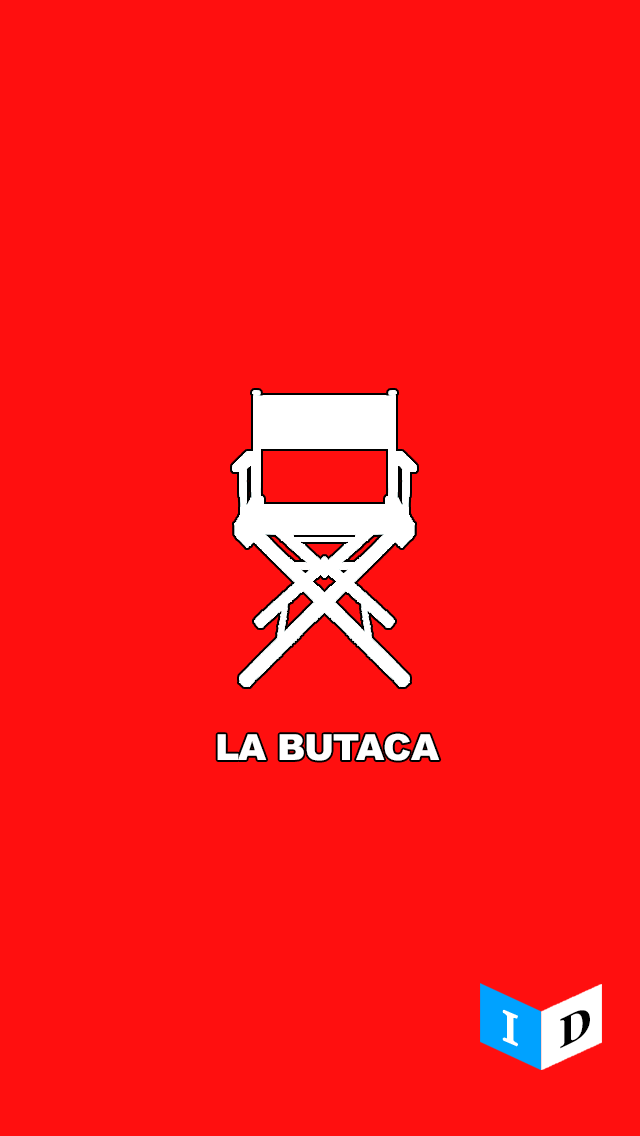
<style>
.page{position:relative;width:640px;height:1136px;background:#ff0f0f}
.page>*{position:absolute;margin:0}
.t1{font:36px "Arial-Black";letter-spacing:-0.02em;color:#ffffff}
.t2{font:42px "Georgia";letter-spacing:-0.02em;color:#ffffff;scale:1.1 1}
.t3{font:42.1px "Georgia-Bold";letter-spacing:-0.02em;color:#000000}
</style>
<div class="page">
<p class="t1" style="left:217px;top:733px;width:223px;height:28px">LA BUTACA</p>
<p class="t2" style="left:503px;top:1010px;width:14px;height:36px;rotate:23deg">I</p>
<p class="t3" style="left:560px;top:1010px;width:30px;height:39px;rotate:-26deg">D</p>
</div>
